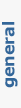
<style>
.page{position:relative;width:21px;height:108px;background:#f7f7f7}
.page>*{position:absolute;margin:0}
.t1{font:16px "Verdana-Bold";color:#336699}
</style>
<div class="page">
<p class="t1" style="left:2px;top:22px;width:16px;height:66px;rotate:-90deg">general</p>
</div>
